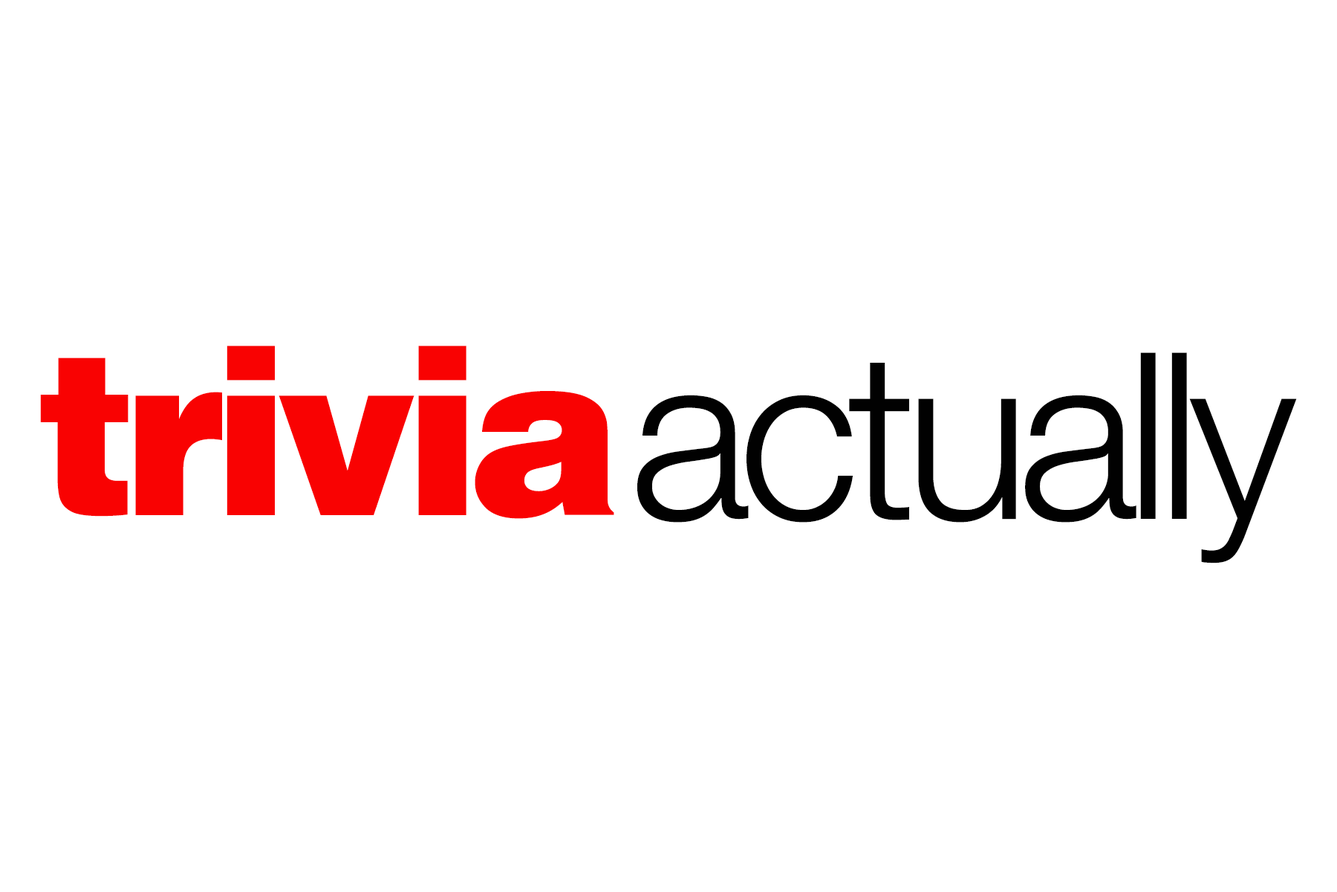
<style>
.page{position:relative;width:1337px;height:892px;background:#ffffff}
.page>*{position:absolute;margin:0}
.t1{font:232.2px "Helvetica-Black";letter-spacing:-0.06em;color:#f90202}
.t2{font:232.2px "HelveticaNeue-Light";letter-spacing:-0.05em;color:#010101}
</style>
<div class="page">
<p class="t1" style="left:40px;top:345px;width:574px;height:174px">trivia</p>
<p class="t2" style="left:637px;top:352px;width:660px;height:211px">actually</p>
</div>
